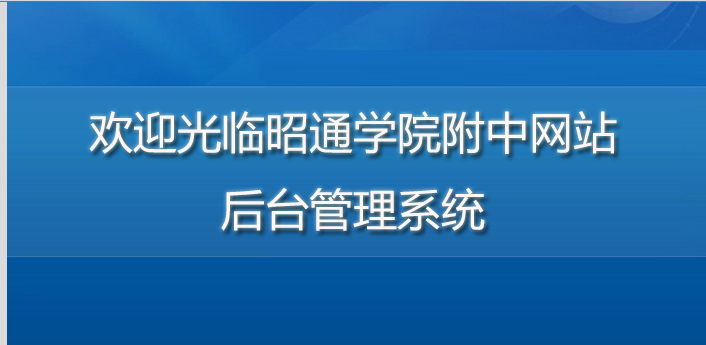
<style>
.page{position:relative;width:706px;height:345px}
.page>*{position:absolute;margin:0}
.t1{font:44px "MicrosoftYaHei";color:#fbf7f7}
</style>
<div class="page">
<p class="t1" style="left:89px;top:111px;width:528px;height:120px;text-align:center">欢迎光临昭通学院附中网站<br>后台管理系统</p>
</div>
